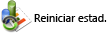
<style>
.page{position:relative;width:109px;height:33px;background:#ffffff}
.page>*{position:absolute;margin:0}
.t1{font:11px "SegoeUI";color:#000000}
</style>
<div class="page">
<p class="t1" style="left:34px;top:14px;width:73px;height:8px">Reiniciar estad.</p>
</div>
